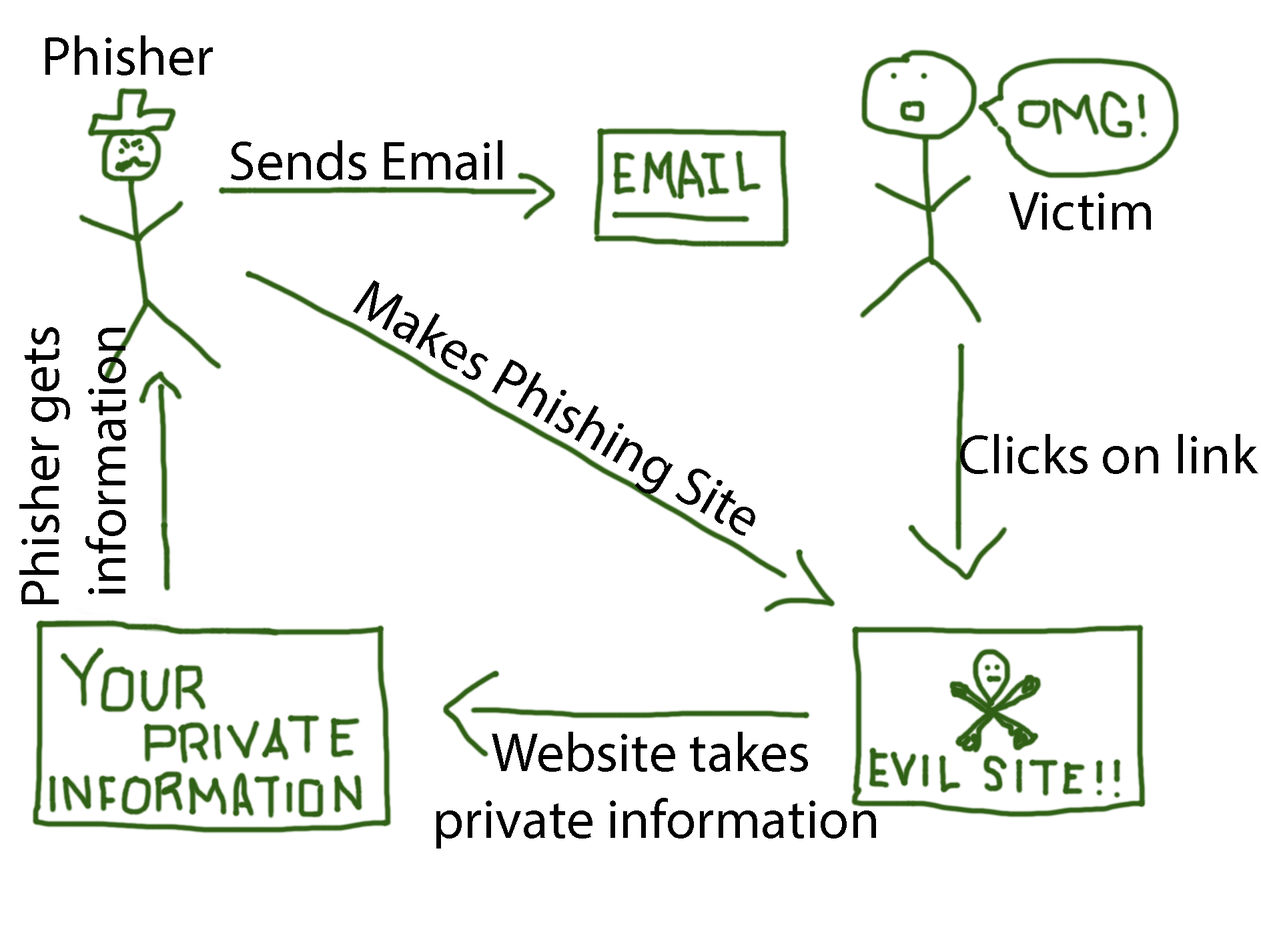
<style>
.page{position:relative;width:1261px;height:946px;background:#ffffff}
.page>*{position:absolute;margin:0}
.t1{font:55.6px "MyriadPro-Regular";color:#010101}
</style>
<div class="page">
<p class="t1" style="left:45px;top:35px;width:168px;height:40px">Phisher</p>
<p class="t1" style="left:231px;top:140px;width:271px;height:40px">Sends Email</p>
<p class="t1" style="left:1009px;top:192px;width:142px;height:38px">Victim</p>
<p class="t1" style="left:353px;top:280px;width:402px;height:256px;rotate:30deg">Makes Phishing Site</p>
<p class="t1" style="left:960px;top:434px;width:298px;height:40px">Clicks on link</p>
<p class="t1" style="left:436px;top:731px;width:440px;height:117px;text-align:center">Website takes <br>private information</p>
</div>
